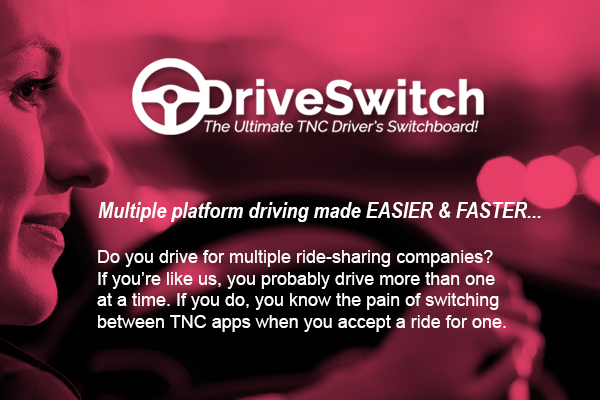
<style>
.page{position:relative;width:600px;height:400px}
.page>*{position:absolute;margin:0}
.t1{font:22px "ArialNarrow-BoldItalic";color:#ffffff}
.t2{font:18px "ArialMT";color:#ffffff}
</style>
<div class="page">
<p class="t1" style="left:98px;top:202px;width:443px;height:20px">Multiple platform driving made EASIER &amp; FASTER...</p>
<p class="t2" style="left:97px;top:250px;width:409px;height:82px">Do you drive for multiple ride-sharing companies? <br>If you’re like us, you probably drive more than one <br>at a time. If you do, you know the pain of switching <br>between TNC apps when you accept a ride for one.</p>
</div>
